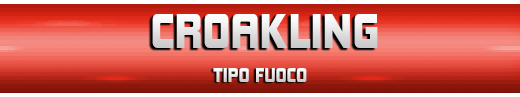
<style>
.page{position:relative;width:520px;height:97px}
.page>*{position:absolute;margin:0}
.t1{font:46px "KimberleyBl-Regular";letter-spacing:0.02em;scale:0.93 1}
.t2{font:18.2px "KimberleyBl-Regular";letter-spacing:0.02em;scale:0.93 1}
</style>
<div class="page">
<p class="t1" style="left:152px;top:14px;width:226px;height:34px">CROAKLING</p>
<p class="t2" style="left:213px;top:68px;width:94px;height:14px">TIPO FUOCO</p>
</div>
